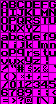
<style>
.page{position:relative;width:56px;height:104px;background:#ff00ff}
.page>*{position:absolute;margin:0}
.t1{font:15px "Arcade";color:#000000}
</style>
<div class="page">
<p class="t1" style="left:1px;top:1px;width:7px;height:7px">A</p>
<p class="t1" style="left:9px;top:1px;width:7px;height:7px">B</p>
<p class="t1" style="left:17px;top:1px;width:7px;height:7px">C</p>
<p class="t1" style="left:25px;top:1px;width:7px;height:7px">D</p>
<p class="t1" style="left:33px;top:1px;width:7px;height:7px">E</p>
<p class="t1" style="left:41px;top:1px;width:7px;height:7px">F</p>
<p class="t1" style="left:49px;top:1px;width:7px;height:7px">G</p>
<p class="t1" style="left:1px;top:9px;width:7px;height:7px">H</p>
<p class="t1" style="left:1px;top:17px;width:7px;height:7px">O</p>
<p class="t1" style="left:9px;top:17px;width:7px;height:7px">P</p>
<p class="t1" style="left:10px;top:9px;width:6px;height:7px">I</p>
<p class="t1" style="left:17px;top:9px;width:7px;height:7px">J</p>
<p class="t1" style="left:17px;top:17px;width:7px;height:7px">Q</p>
<p class="t1" style="left:25px;top:9px;width:7px;height:7px">K</p>
<p class="t1" style="left:25px;top:17px;width:7px;height:7px">R</p>
<p class="t1" style="left:33px;top:9px;width:7px;height:7px">L</p>
<p class="t1" style="left:33px;top:17px;width:7px;height:7px">S</p>
<p class="t1" style="left:41px;top:9px;width:7px;height:7px">M</p>
<p class="t1" style="left:42px;top:17px;width:6px;height:7px">T</p>
<p class="t1" style="left:49px;top:9px;width:7px;height:7px">N</p>
<p class="t1" style="left:49px;top:17px;width:7px;height:7px">U</p>
<p class="t1" style="left:1px;top:25px;width:7px;height:7px">V</p>
<p class="t1" style="left:9px;top:25px;width:7px;height:7px">W</p>
<p class="t1" style="left:17px;top:25px;width:7px;height:7px">X</p>
<p class="t1" style="left:26px;top:25px;width:6px;height:7px">Y</p>
<p class="t1" style="left:33px;top:25px;width:7px;height:7px">Z</p>
<p class="t1" style="left:1px;top:35px;width:7px;height:5px">a</p>
<p class="t1" style="left:1px;top:41px;width:7px;height:7px">h</p>
<p class="t1" style="left:9px;top:33px;width:7px;height:7px">b</p>
<p class="t1" style="left:17px;top:35px;width:7px;height:5px">c</p>
<p class="t1" style="left:25px;top:33px;width:7px;height:7px">d</p>
<p class="t1" style="left:26px;top:41px;width:6px;height:7px">k</p>
<p class="t1" style="left:33px;top:35px;width:7px;height:5px">e</p>
<p class="t1" style="left:43px;top:33px;width:5px;height:7px">f</p>
<p class="t1" style="left:49px;top:33px;width:7px;height:7px">g</p>
<p class="t1" style="left:1px;top:51px;width:7px;height:5px">o</p>
<p class="t1" style="left:9px;top:49px;width:7px;height:7px">p</p>
<p class="t1" style="left:17px;top:49px;width:7px;height:7px">q</p>
<p class="t1" style="left:27px;top:51px;width:5px;height:5px">r</p>
<p class="t1" style="left:33px;top:51px;width:7px;height:5px">s</p>
<p class="t1" style="left:41px;top:43px;width:7px;height:5px">m</p>
<p class="t1" style="left:43px;top:49px;width:5px;height:7px">t</p>
<p class="t1" style="left:49px;top:51px;width:7px;height:5px">u</p>
<p class="t1" style="left:50px;top:43px;width:6px;height:5px">n</p>
<p class="t1" style="left:1px;top:65px;width:7px;height:7px">!</p>
<p class="t1" style="left:1px;top:59px;width:7px;height:5px">v</p>
<p class="t1" style="left:9px;top:59px;width:7px;height:5px">w</p>
<p class="t1" style="left:11px;top:65px;width:5px;height:3px">"</p>
<p class="t1" style="left:17px;top:65px;width:7px;height:7px">#</p>
<p class="t1" style="left:17px;top:59px;width:7px;height:5px">x</p>
<p class="t1" style="left:25px;top:57px;width:7px;height:7px">y</p>
<p class="t1" style="left:28px;top:65px;width:4px;height:7px">$</p>
<p class="t1" style="left:33px;top:59px;width:7px;height:5px">z</p>
<p class="t1" style="left:43px;top:65px;width:5px;height:7px">&amp;</p>
<p class="t1" style="left:54px;top:65px;width:2px;height:3px">'</p>
<p class="t1" style="left:4px;top:73px;width:4px;height:7px">(</p>
<p class="t1" style="left:12px;top:73px;width:4px;height:7px">)</p>
<p class="t1" style="left:21px;top:75px;width:3px;height:3px">*</p>
<p class="t1" style="left:26px;top:74px;width:6px;height:5px">+</p>
<p class="t1" style="left:34px;top:67px;width:6px;height:5px">%</p>
<p class="t1" style="left:37px;top:76px;width:3px;height:3px">,</p>
<p class="t1" style="left:1px;top:89px;width:7px;height:7px">6</p>
<p class="t1" style="left:2px;top:81px;width:6px;height:7px">/</p>
<p class="t1" style="left:9px;top:89px;width:7px;height:7px">7</p>
<p class="t1" style="left:10px;top:81px;width:6px;height:7px">0</p>
<p class="t1" style="left:17px;top:89px;width:7px;height:7px">8</p>
<p class="t1" style="left:18px;top:81px;width:6px;height:7px">1</p>
<p class="t1" style="left:25px;top:81px;width:7px;height:7px">2</p>
<p class="t1" style="left:25px;top:89px;width:7px;height:7px">9</p>
<p class="t1" style="left:33px;top:81px;width:7px;height:7px">3</p>
<p class="t1" style="left:41px;top:81px;width:7px;height:7px">4</p>
<p class="t1" style="left:49px;top:81px;width:7px;height:7px">5</p>
<p class="t1" style="left:3px;top:99px;width:5px;height:3px">=</p>
<p class="t1" style="left:12px;top:98px;width:4px;height:5px">&gt;</p>
<p class="t1" style="left:18px;top:97px;width:6px;height:7px">?</p>
<p class="t1" style="left:25px;top:97px;width:7px;height:7px">@</p>
<p class="t1" style="left:37px;top:97px;width:3px;height:7px">[</p>
<p class="t1" style="left:38px;top:90px;width:2px;height:5px">:</p>
<p class="t1" style="left:41px;top:97px;width:7px;height:7px">\</p>
<p class="t1" style="left:46px;top:90px;width:2px;height:6px">;</p>
<p class="t1" style="left:52px;top:90px;width:4px;height:5px">&lt;</p>
<p class="t1" style="left:53px;top:97px;width:3px;height:7px">]</p>
</div>
